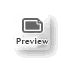
<style>
.page{position:relative;width:64px;height:64px;background:#ffffff}
.page>*{position:absolute;margin:0}
.t1{font:8.8px "AmiraParadiso";letter-spacing:0.05em;color:#424242}
</style>
<div class="page">
<p class="t1" style="left:16px;top:38px;width:33px;height:6px">Preview</p>
</div>
